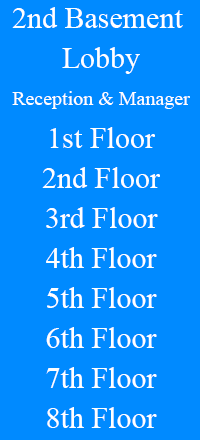
<style>
.page{position:relative;width:200px;height:440px;background:#008aff}
.page>*{position:absolute;margin:0}
.t1{font:30px "TimesNewRomanPSMT";color:#ffffff}
.t2{font:20px "TimesNewRomanPSMT";color:#ffffff}
</style>
<div class="page">
<p class="t1" style="left:12px;top:7px;width:171px;height:21px">2nd Basement</p>
<p class="t1" style="left:62px;top:47px;width:78px;height:27px">Lobby</p>
<p class="t2" style="left:12px;top:91px;width:178px;height:18px">Reception &amp; Manager</p>
<p class="t1" style="left:50px;top:127px;width:105px;height:21px">1st Floor</p>
<p class="t1" style="left:42px;top:167px;width:118px;height:21px">2nd Floor</p>
<p class="t1" style="left:46px;top:207px;width:112px;height:21px">3rd Floor</p>
<p class="t1" style="left:46px;top:247px;width:111px;height:21px">4th Floor</p>
<p class="t1" style="left:47px;top:287px;width:110px;height:21px">5th Floor</p>
<p class="t1" style="left:46px;top:327px;width:111px;height:21px">6th Floor</p>
<p class="t1" style="left:46px;top:367px;width:111px;height:21px">7th Floor</p>
<p class="t1" style="left:47px;top:407px;width:110px;height:21px">8th Floor</p>
</div>
